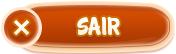
<style>
.page{position:relative;width:176px;height:54px}
.page>*{position:absolute;margin:0}
.t1{font:25px "Cartwheel";color:#ffffff}
</style>
<div class="page">
<p class="t1" style="left:77px;top:17px;width:43px;height:18px">SAIR</p>
</div>
